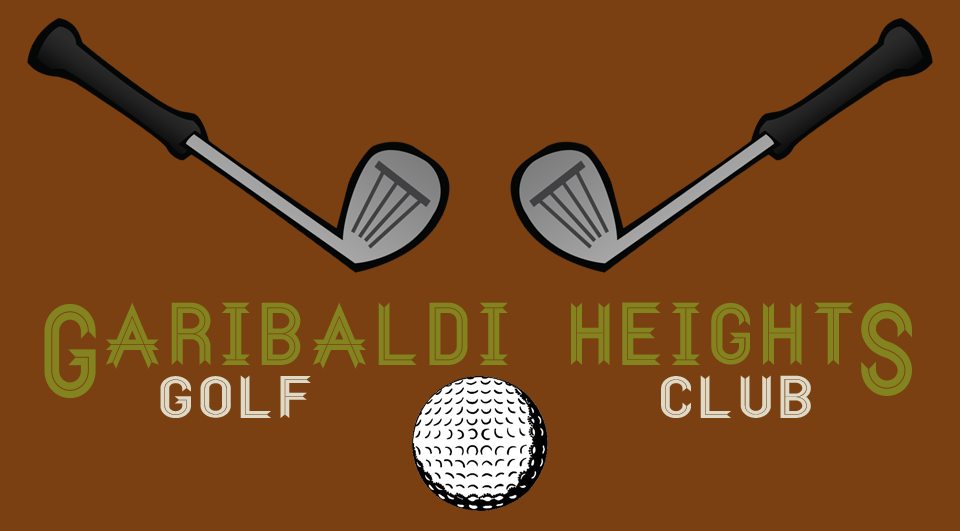
<style>
.page{position:relative;width:960px;height:531px;background:#7a4012}
.page>*{position:absolute;margin:0}
.t1{font:119.7px "Ribbon";letter-spacing:0.005em;color:#83831f;scale:0.93 1}
.t2{font:79.2px "Ribbon";letter-spacing:0.005em;color:#83831f;scale:1.06 1}
.t3{font:118.6px "Ribbon";letter-spacing:0.005em;color:#83831f;scale:0.94 1}
.t4{font:53.6px "Ribbon";letter-spacing:0.005em;color:#dfdac7;scale:1.24 1}
</style>
<div class="page">
<p class="t1" style="left:44px;top:303px;width:52px;height:96px">g</p>
<p class="t2" style="left:106px;top:302px;width:748px;height:67px">ARIBALDI HEIGHT</p>
<p class="t3" style="left:861px;top:302px;width:51px;height:94px">s</p>
<p class="t4" style="left:160px;top:375px;width:151px;height:43px">Golf</p>
<p class="t4" style="left:661px;top:375px;width:150px;height:43px">Club</p>
</div>
